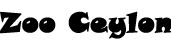
<style>
.page{position:relative;width:171px;height:56px;background:#ffffff}
.page>*{position:absolute;margin:0}
.t1{font:27px "SnapITC-Regular";color:#000000;font-weight:bold}
</style>
<div class="page">
<p class="t1" style="left:0px;top:11px;width:172px;height:28px">Zoo Ceylon</p>
</div>
